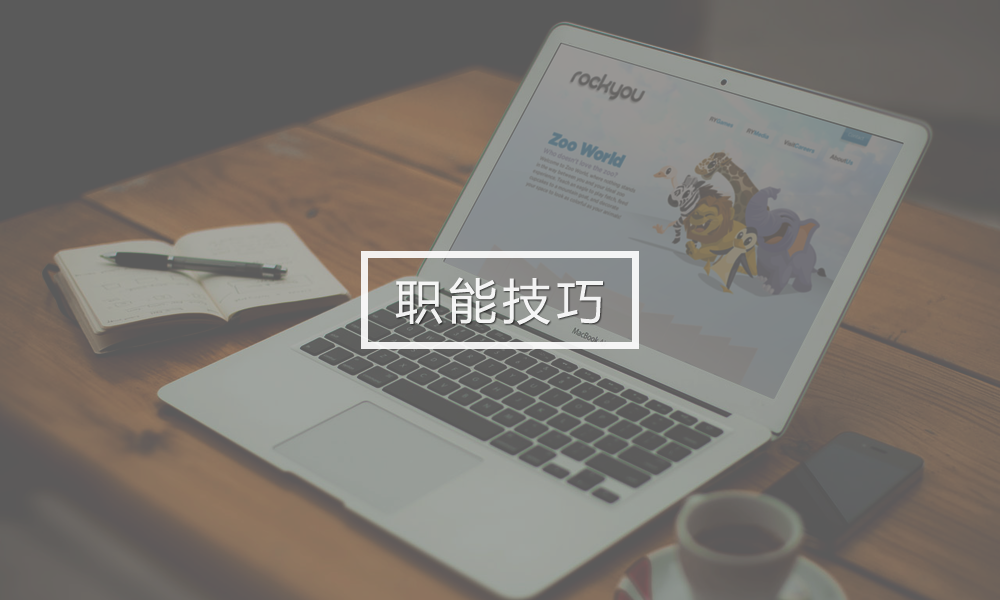
<style>
.page{position:relative;width:1000px;height:600px}
.page>*{position:absolute;margin:0}
.t1{font:48px "MicrosoftYaHei";letter-spacing:0.12em;color:#ffffff}
</style>
<div class="page">
<p class="t1" style="left:395px;top:277px;width:208px;height:48px;opacity:0.9">职能技巧</p>
</div>
